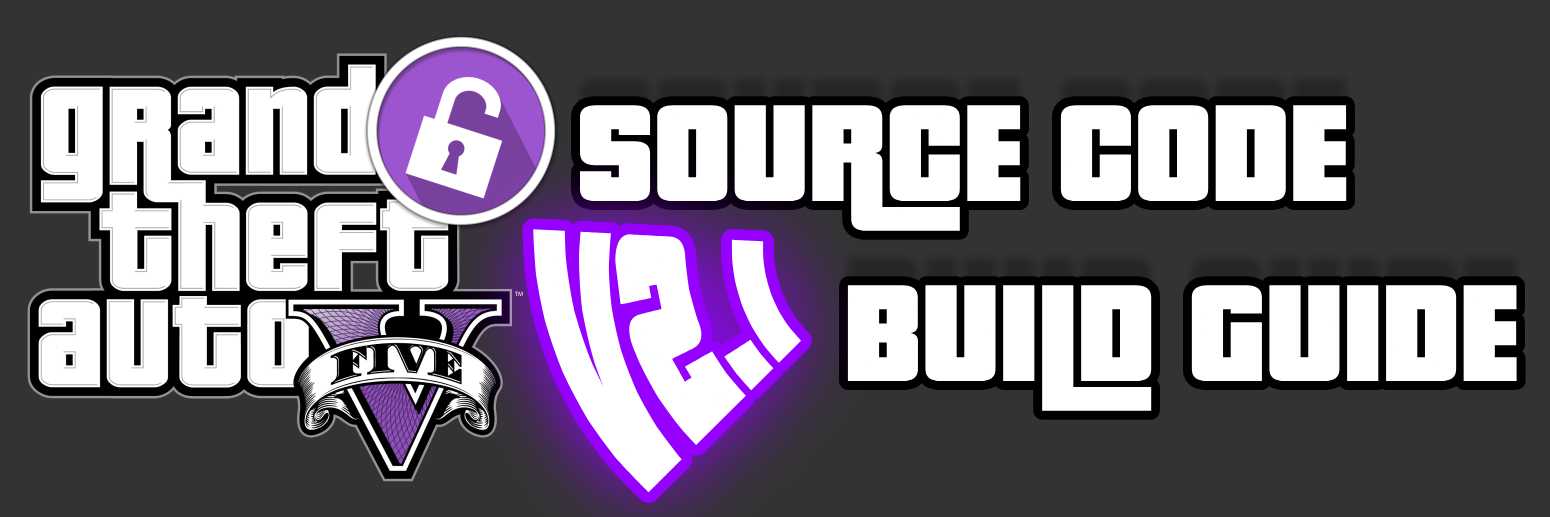
<style>
.page{position:relative;width:1550px;height:517px;background:#333333}
.page>*{position:absolute;margin:0}
.t1{font:150px "PricedownBl-Regular";color:#ffffff}
</style>
<div class="page">
<p class="t1" style="left:580px;top:105px;width:937px;height:306px">SOURCE CODE <br>        BUILD GUIDE</p>
<p class="t1" style="left:533px;top:229px;width:269px;height:264px">V2.1</p>
</div>
